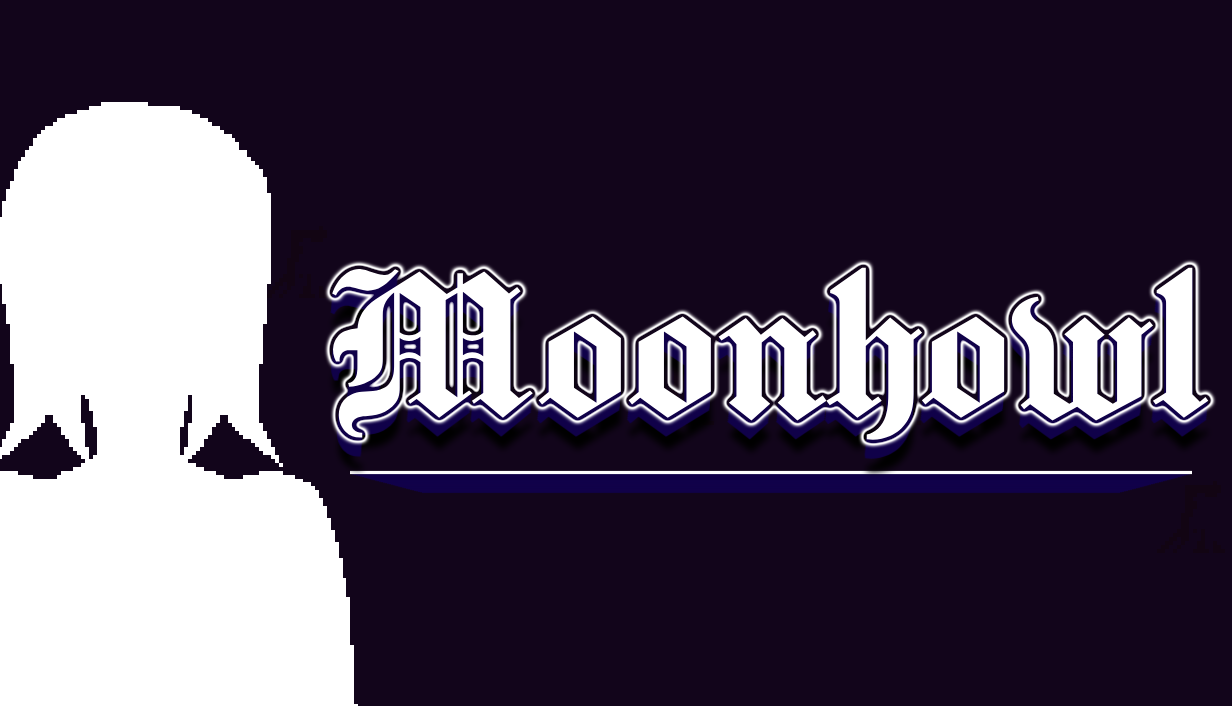
<style>
.page{position:relative;width:1232px;height:706px;background:#12051b}
.page>*{position:absolute;margin:0}
.t1{font:195.6px "Chomsky";color:#ffffff}
</style>
<div class="page">
<p class="t1" style="left:332px;top:267px;width:877px;height:173px">Moonhowl</p>
</div>
